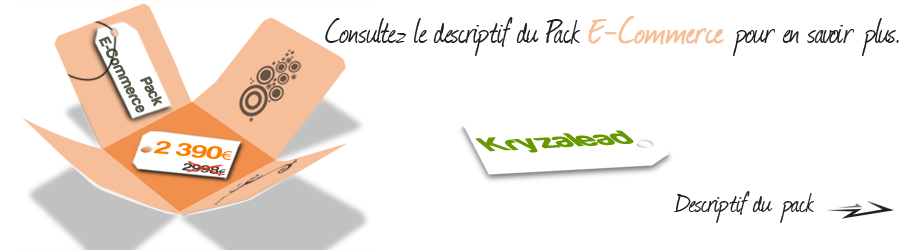
<style>
.page{position:relative;width:900px;height:250px;background:#ffffff}
.page>*{position:absolute;margin:0}
.t1{font:40px "Journal";color:#202021;scale:0.9 1}
.t2{font:42px "Journal";color:#f7bf99;font-weight:bold;scale:0.9 1}
.t3{font:15px "Harabara";color:#545b48;font-weight:bold}
.t4{font:29.4px "Harabara";color:#669900;font-weight:bold;scale:1.19 1}
.t5{font:19px "Harabara";color:#fe7e01;scale:1.56 1}
.t6{font:13.5px "MyriadPro-Regular";color:#fe7e01;scale:1.56 1}
.t7{font:10.9px "Harabara";scale:1.64 1}
.t8{font:8px "MyriadPro-Regular";scale:1.64 1}
.t9{font:32px "Journal";color:#202021}
</style>
<div class="page">
<p class="t1" style="left:325px;top:16px;width:574px;height:40px">Consultez le descriptif du Pack <span class="t2">E-Commerce</span> pour en savoir plus.</p>
<p class="t3" style="left:98px;top:36px;width:64px;height:77px;text-align:right;rotate:62deg">Pack<br>E-Commerce</p>
<p class="t4" style="left:475px;top:130px;width:159px;height:23px;rotate:-3deg">Kryzalead</p>
<p class="t5" style="left:153px;top:141px;width:80px;height:19px;rotate:5deg">2 390<span class="t6">€</span></p>
<p class="t7" style="left:181px;top:163px;width:45px;height:12px;rotate:7deg">2998<span class="t8">€</span></p>
<p class="t9" style="left:673px;top:191px;width:141px;height:32px">Descriptif du pack</p>
</div>
